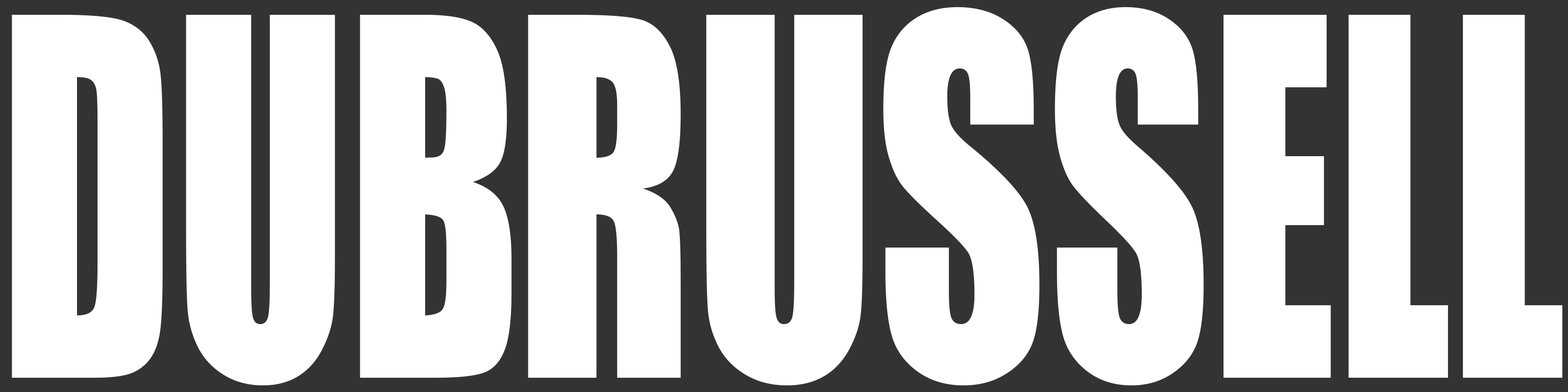
<style>
.page{position:relative;width:1568px;height:392px;background:#ffffff}
.page>*{position:absolute;margin:0}
.t1{font:458.9px "Impact";color:#ffffff;scale:0.69 1}
.t2{font:458.9px "Impact";color:#ffffff;scale:0.72 1}
.t3{font:458.9px "Impact";color:#ffffff;scale:0.66 1}
</style>
<div class="page">
<p class="t1" style="left:12px;top:15px;width:500px;height:370px">DUB</p>
<p class="t2" style="left:528px;top:7px;width:512px;height:378px">RUS</p>
<p class="t3" style="left:1055px;top:7px;width:507px;height:378px"><span class="t1">S</span>ELL</p>
</div>
